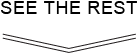
<style>
.page{position:relative;width:138px;height:54px;background:#ffffff}
.page>*{position:absolute;margin:0}
.t1{font:18px "ArialMT";letter-spacing:0.035em;color:#000000;text-transform:uppercase}
</style>
<div class="page">
<p class="t1" style="left:1px;top:1px;width:136px;height:13px">See The Rest</p>
</div>
